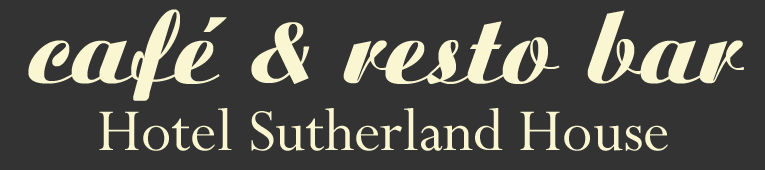
<style>
.page{position:relative;width:765px;height:170px;background:#333333}
.page>*{position:absolute;margin:0}
.t1{font:108px "Aristocrat";color:#faf6d2}
.t2{font:66.7px "Perpetua";color:#faf6d2}
</style>
<div class="page">
<p class="t1" style="left:28px;top:9px;width:716px;height:92px">café &amp; resto bar</p>
<p class="t2" style="left:99px;top:108px;width:569px;height:43px">Hotel Sutherland House</p>
</div>
